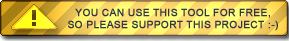
<style>
.page{position:relative;width:289px;height:41px}
.page>*{position:absolute;margin:0}
.t1{font:10px "ArialMT";letter-spacing:0.025em;color:#303943;font-weight:bold}
</style>
<div class="page">
<p class="t1" style="left:68px;top:8px;width:210px;height:23px;text-align:center">YOU CAN USE THIS TOOL FOR FREE,<br>SO PLEASE SUPPORT THIS PROJECT :-)</p>
</div>
